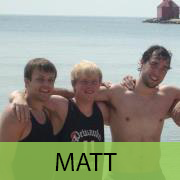
<style>
.page{position:relative;width:180px;height:180px}
.page>*{position:absolute;margin:0}
.t1{font:26.7px "MyriadPro-Regular";color:#030303}
</style>
<div class="page">
<p class="t1" style="left:55px;top:153px;width:62px;height:18px">MATT</p>
</div>
